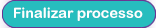
<style>
.page{position:relative;width:156px;height:28px;background:#27bdbe}
.page>*{position:absolute;margin:0}
.t1{font:14.6px "ArialRoundedMTBold";color:#ffffff}
</style>
<div class="page">
<p class="t1" style="left:14px;top:7px;width:129px;height:14px">Finalizar processo</p>
</div>
